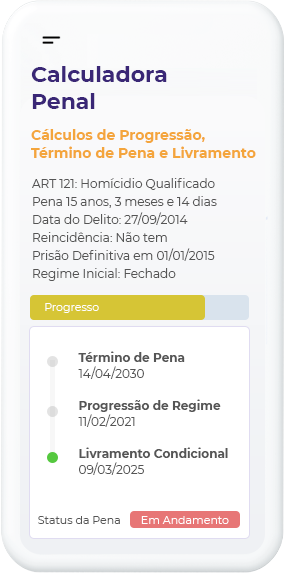
<style>
.page{position:relative;width:284px;height:574px;background:#ffffff}
.page>*{position:absolute;margin:0}
.t1{font:21.9px "Montserrat-Bold";color:#3a2776}
.t2{font:14px/18px "Montserrat-Bold";color:#f4a53c}
.t3{font:12px/18px "Montserrat-Regular";color:#555555}
.t4{font:11px "Montserrat-Regular";color:#ffffff}
.t5{font:12px/16px "Montserrat-Bold";color:#555555}
.t6{font:12px/16px "Montserrat-Regular";color:#555555}
.t7{font:11px "Montserrat-Regular";color:#555555}
</style>
<div class="page">
<p class="t1" style="left:31px;top:66px;width:136px;height:43px">Calculadora<br>Penal</p>
<p class="t2" style="left:31px;top:129px;width:225px;height:29px">Cálculos de Progressão, <br>Término de Pena e Livramento</p>
<p class="t3" style="left:32px;top:178px;width:185px;height:103px">ART 121: Homícidio Qualificado<br>Pena 15 anos, 3 meses e 14 dias <br>Data do Delito: 27/09/2014<br>Reincidência: Não tem<br>Prisão Definitiva em 01/01/2015<br>Regime Inicial: Fechado</p>
<p class="t4" style="left:45px;top:303px;width:54px;height:10px">Progresso</p>
<p class="t5" style="left:78px;top:351px;width:150px;height:124px"><span class="t6"><br></span><br>Término de Pena <br><span class="t6">14/04/2030<br><br></span>Progressão de Regime <br><span class="t6">11/02/2021<br><br></span>Livramento Condicional <br><span class="t6">09/03/2025</span></p>
<p class="t7" style="left:38px;top:516px;width:191px;height:8px">Status da Pena       <span class="t4">Em Andamento</span></p>
</div>
